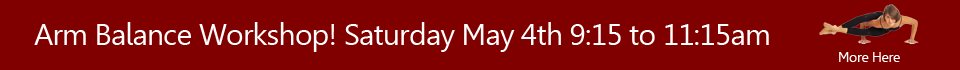
<style>
.page{position:relative;width:960px;height:70px;background:#800000}
.page>*{position:absolute;margin:0}
.t1{font:30px "Gisha";letter-spacing:-0.025em;color:#ffffff}
.t2{font:14px "Gisha";letter-spacing:-0.025em;color:#ffffff}
</style>
<div class="page">
<p class="t1" style="left:34px;top:22px;width:735px;height:30px">Arm Balance Workshop! Saturday May 4th 9:15 to 11:15am</p>
<p class="t2" style="left:839px;top:52px;width:61px;height:10px">More Here</p>
</div>
